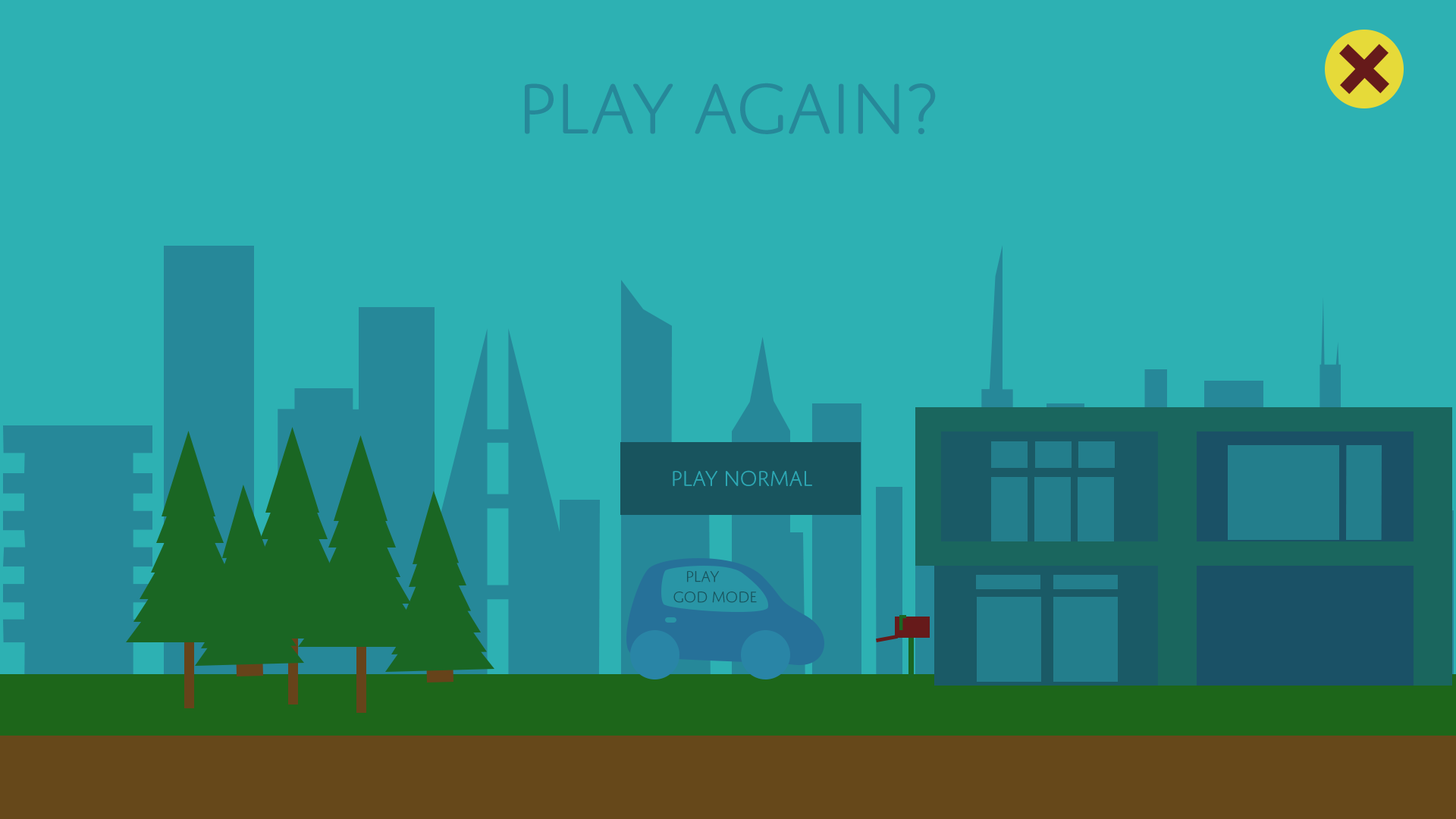
<style>
.page{position:relative;width:1456px;height:819px;background:#2db1b3}
.page>*{position:absolute;margin:0}
.t1{font:75.8px "DomusTitlingLight";letter-spacing:-0.04em;color:#268899}
.t2{font:22.7px "DomusTitlingLight";letter-spacing:-0.04em;color:#2da7b3}
.t3{font:16.3px/20.5px "DomusTitlingLight";letter-spacing:-0.04em;color:#18545e}
</style>
<div class="page">
<p class="t1" style="left:525px;top:83px;width:411px;height:51px">Play again?</p>
<p class="t2" style="left:673px;top:470px;width:139px;height:16px">Play Normal</p>
<p class="t3" style="left:673px;top:571px;width:84px;height:32px">play<br>god mode</p>
</div>
